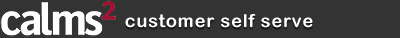
<style>
.page{position:relative;width:400px;height:38px;background:#333333}
.page>*{position:absolute;margin:0}
.t1{font:18px "ArialRoundedMTBold";letter-spacing:0.05em;color:#fefefe}
</style>
<div class="page">
<p class="t1" style="left:125px;top:14px;width:188px;height:14px">customer self serve</p>
</div>
